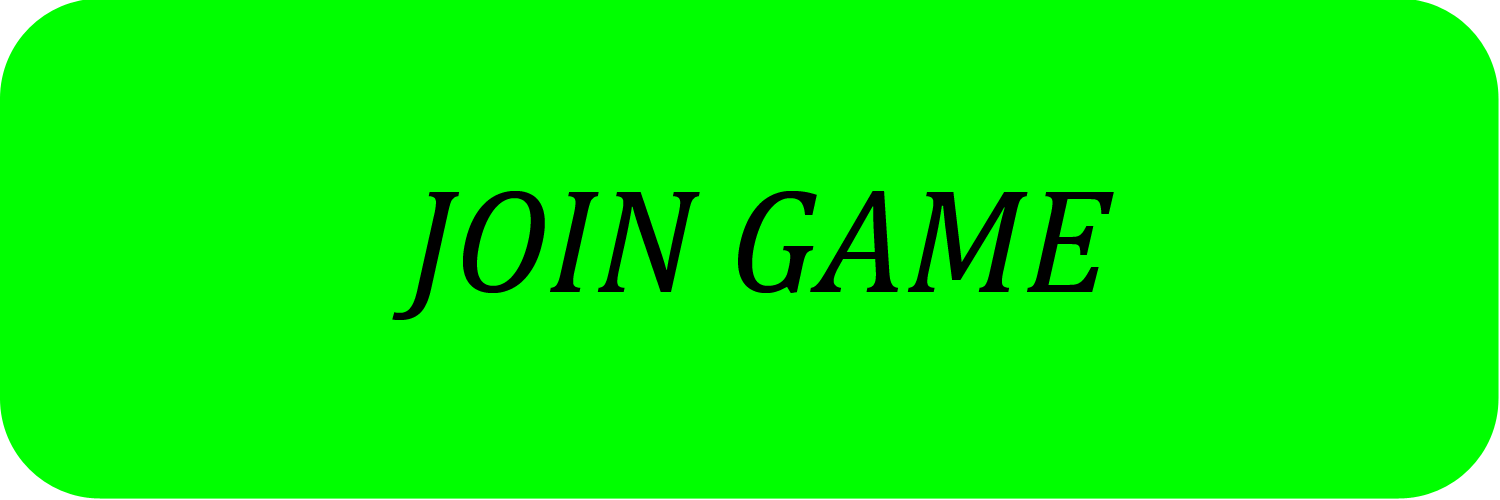
<style>
.page{position:relative;width:1500px;height:500px;background:#00ff00}
.page>*{position:absolute;margin:0}
.t1{font:150px "Cambria-Italic";color:#000000}
</style>
<div class="page">
<p class="t1" style="left:392px;top:191px;width:722px;height:129px">JOIN GAME</p>
</div>
